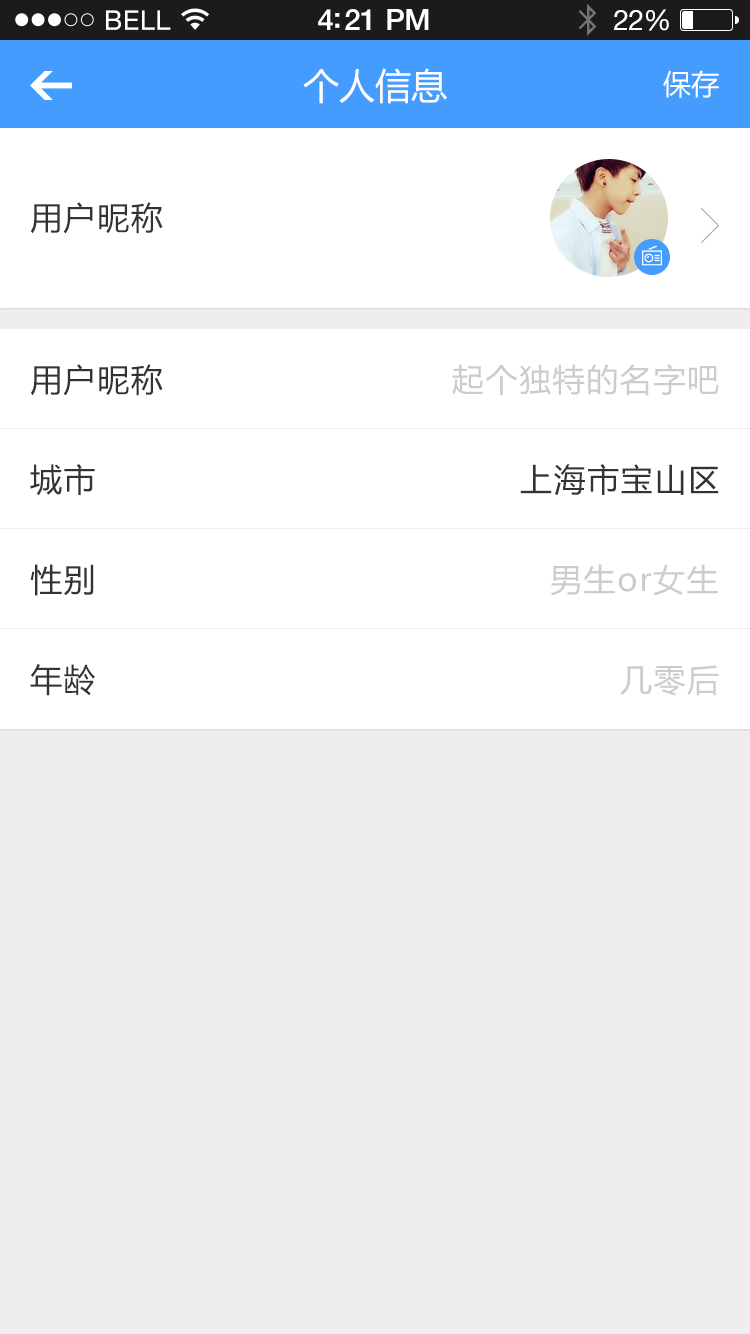
<style>
.page{position:relative;width:750px;height:1334px;background:#eeeeee}
.page>*{position:absolute;margin:0}
.t1{font:36px "MicrosoftYaHei";color:#ffffff}
.t2{font:28px "MicrosoftYaHei";color:#ffffff}
.t3{font:32px "MicrosoftYaHei";letter-spacing:0.05em;color:#333333}
.t4{font:32px "MicrosoftYaHei";letter-spacing:0.05em;color:#cccccc}
</style>
<div class="page">
<p class="t1" style="left:303px;top:68px;width:144px;height:36px">个人信息</p>
<p class="t2" style="left:663px;top:70px;width:56px;height:28px">保存</p>
<p class="t3" style="left:30px;top:202px;width:133px;height:32px">用户昵称</p>
<p class="t3" style="left:30px;top:364px;width:133px;height:32px">用户昵称</p>
<p class="t4" style="left:452px;top:364px;width:267px;height:32px">起个独特的名字吧</p>
<p class="t3" style="left:30px;top:464px;width:65px;height:32px">城市</p>
<p class="t3" style="left:520px;top:464px;width:199px;height:31px">上海市宝山区</p>
<p class="t3" style="left:30px;top:564px;width:64px;height:32px">性别</p>
<p class="t4" style="left:550px;top:564px;width:168px;height:32px">男生or女生</p>
<p class="t3" style="left:30px;top:664px;width:65px;height:32px">年龄</p>
<p class="t4" style="left:620px;top:665px;width:99px;height:31px">几零后</p>
</div>
